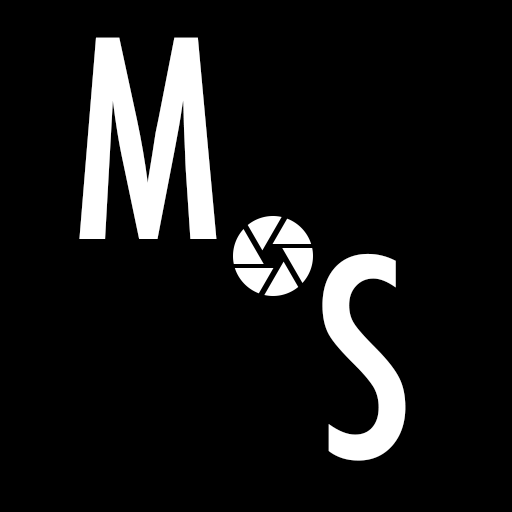
<style>
.page{position:relative;width:512px;height:512px;background:#000000}
.page>*{position:absolute;margin:0}
.t1{font:266.7px "Futura-CondensedMedium";color:#ffffff}
</style>
<div class="page">
<p class="t1" style="left:79px;top:37px;width:138px;height:202px">M</p>
<p class="t1" style="left:322px;top:253px;width:84px;height:208px">S</p>
</div>
